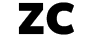
<style>
.page{position:relative;width:92px;height:37px;background:#ffffff}
.page>*{position:absolute;margin:0}
.t1{font:44px "MulishRoman-ExtraBlack";color:#000000}
</style>
<div class="page">
<p class="t1" style="left:18px;top:2px;width:56px;height:33px">ZC</p>
</div>
